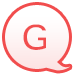
<style>
.page{position:relative;width:74px;height:78px;background:#ffffff}
.page>*{position:absolute;margin:0}
.t1{font:36px "SIL-Hei-Med-Jian";color:#f14d4d}
</style>
<div class="page">
<p class="t1" style="left:23px;top:24px;width:23px;height:26px">G</p>
</div>
